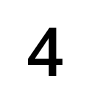
<style>
.page{position:relative;width:100px;height:100px;background:#ffffff}
.page>*{position:absolute;margin:0}
.t1{font:72px "Shruti-Bold";color:#000000}
</style>
<div class="page">
<p class="t1" style="left:28px;top:27px;width:35px;height:49px">4</p>
</div>
